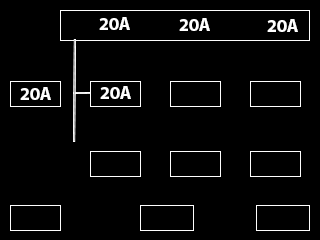
<style>
.page{position:relative;width:320px;height:240px;background:#000000}
.page>*{position:absolute;margin:0}
.t1{font:18px "MyriadPro-Bold";color:#ffffff}
</style>
<div class="page">
<p class="t1" style="left:99px;top:17px;width:31px;height:13px">20A</p>
<p class="t1" style="left:179px;top:18px;width:31px;height:13px">20A</p>
<p class="t1" style="left:267px;top:19px;width:31px;height:13px">20A</p>
<p class="t1" style="left:20px;top:87px;width:31px;height:13px">20A</p>
<p class="t1" style="left:100px;top:86px;width:31px;height:13px">20A</p>
</div>
